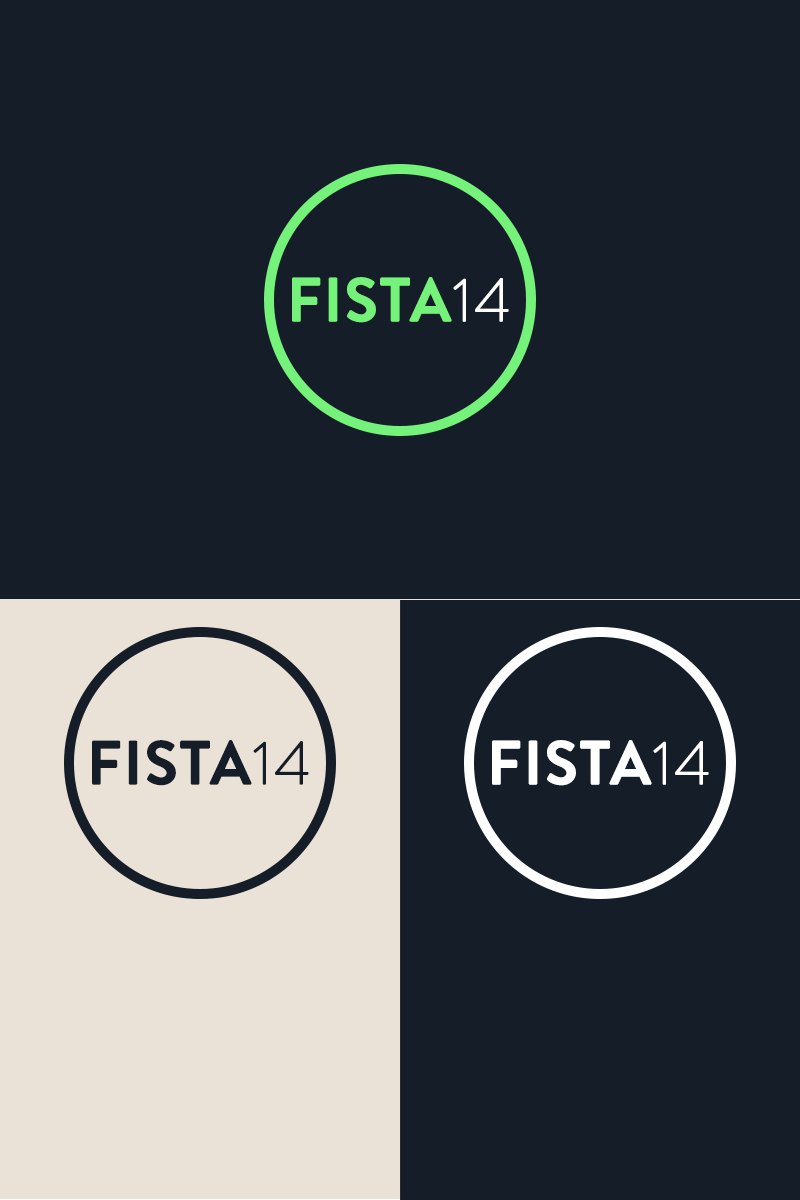
<style>
.page{position:relative;width:800px;height:1200px;background:#141d28}
.page>*{position:absolute;margin:0}
.t1{font:62px "BrandonGrotesque-Bold";color:#74f27a;font-weight:bold}
.t2{font:62px "BrandonGrotesque-Light";color:#ffffff;font-weight:bold}
.t3{font:62px "BrandonGrotesque-Bold";color:#141d28;font-weight:bold}
.t4{font:62px "BrandonGrotesque-Light";color:#141d28;font-weight:bold}
.t5{font:62px "BrandonGrotesque-Bold";color:#ffffff;font-weight:bold}
</style>
<div class="page">
<p class="t1" style="left:292px;top:277px;width:217px;height:46px">FISTA<span class="t2">14</span></p>
<p class="t3" style="left:92px;top:740px;width:217px;height:46px">FISTA<span class="t4">14</span></p>
<p class="t5" style="left:492px;top:740px;width:217px;height:46px">FISTA<span class="t2">14</span></p>
</div>
